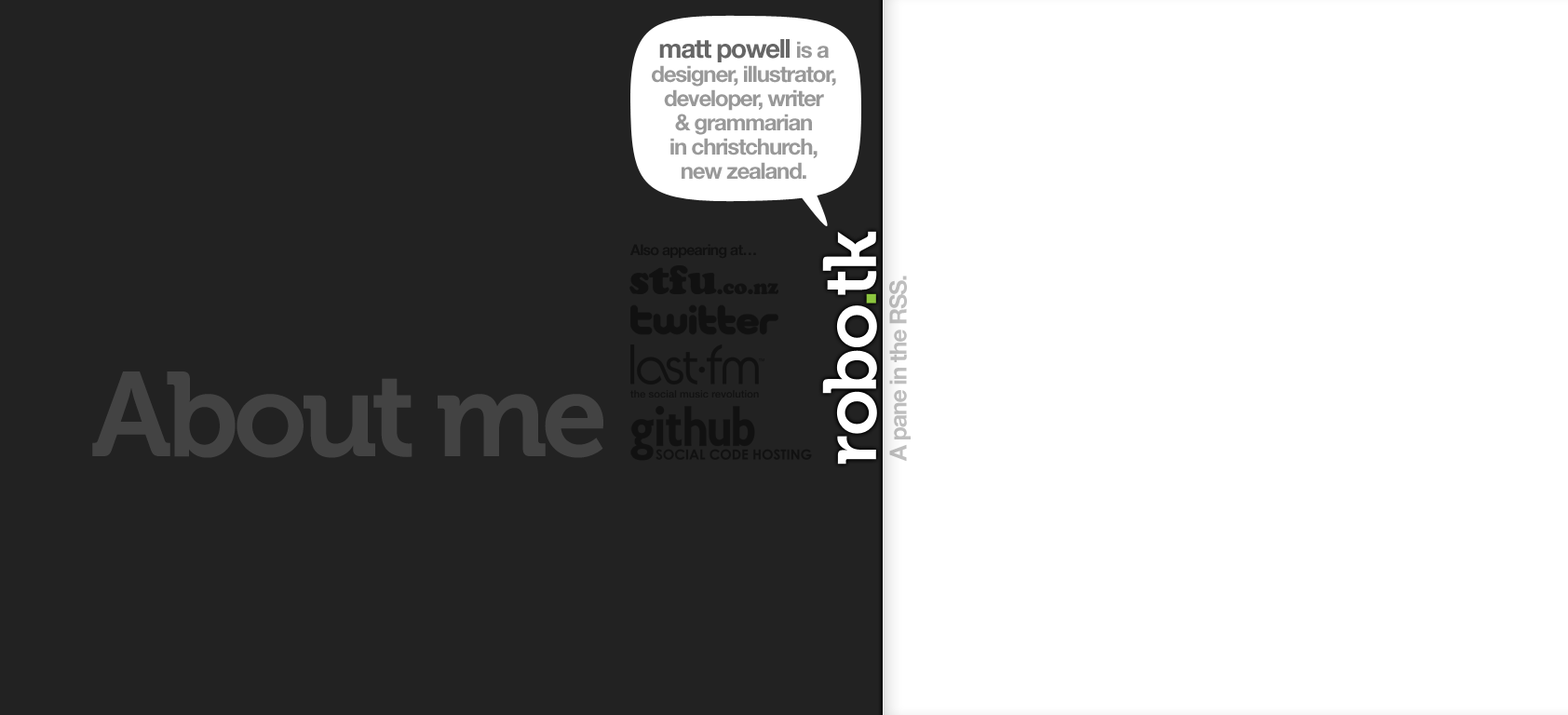
<style>
.page{position:relative;width:1568px;height:715px;background:#222222}
.page>*{position:absolute;margin:0}
.t1{font:22.3px/24.2px "HelveticaNeueLTStd-Bd";letter-spacing:-0.05em;color:#999999}
.t2{font:26.1px/24.2px "HelveticaNeueLTStd-Bd";letter-spacing:-0.05em;color:#666666}
.t3{font:14.9px "HelveticaNeueLTStd-Bd";letter-spacing:-0.05em;color:#000000}
.t4{font:23.4px "HelveticaNeueLTStd-Bd";letter-spacing:-0.05em;color:#bdbdbd}
.t5{font:119.2px "Museo-700";letter-spacing:-0.05em;color:#434343}
</style>
<div class="page">
<p class="t1" style="left:652px;top:39px;width:184px;height:141px;text-align:center"><span class="t2">matt powell </span>is a<br>designer, illustrator,<br>developer, writer<br>&amp; grammarian<br>in christchurch,<br>new zealand.</p>
<p class="t3" style="left:629px;top:244px;width:127px;height:15px;opacity:0.5">Also appearing at…</p>
<p class="t4" style="left:889px;top:276px;width:22px;height:186px;rotate:-90deg">A pane in the RSS.</p>
<p class="t5" style="left:92px;top:372px;width:511px;height:86px">About me</p>
</div>
